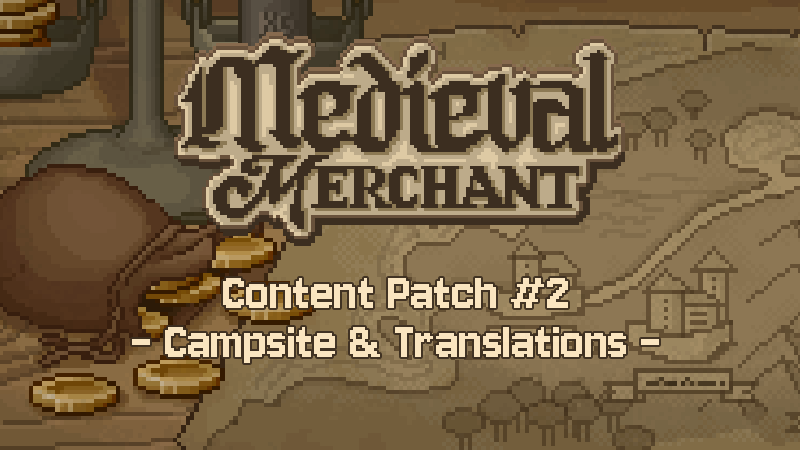
<style>
.page{position:relative;width:800px;height:450px}
.page>*{position:absolute;margin:0}
.t1{font:56px/49px "Jersey10-Regular";color:#ffeac5}
</style>
<div class="page">
<p class="t1" style="left:132px;top:278px;width:527px;height:85px;text-align:center;opacity:0.95">Content Patch #2<br>- Campsite &amp; Translations -</p>
</div>
